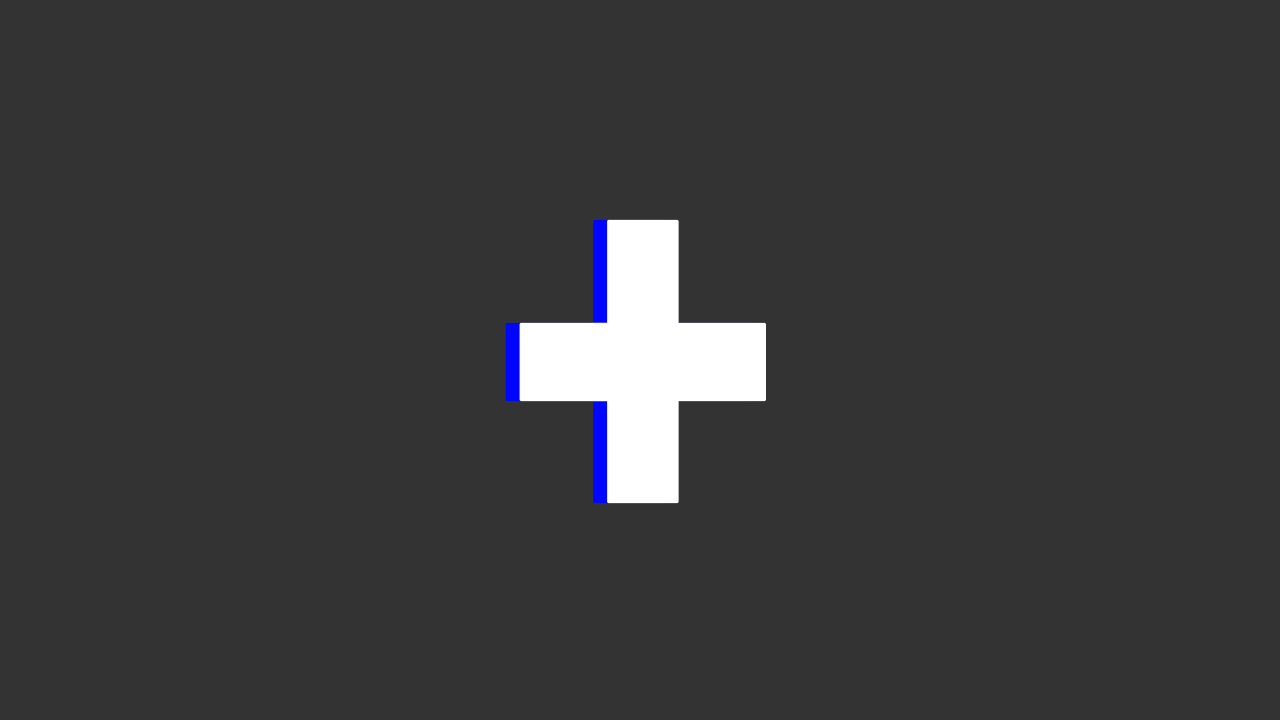
<style>
.page{position:relative;width:1280px;height:720px;background:#333333}
.page>*{position:absolute;margin:0}
.t1{font:131.9px "Bauhaus93";letter-spacing:-0.07em;color:#ffffff;font-weight:bold;scale:0.89 1}
</style>
<div class="page">
<p class="t1" style="left:519px;top:219px;width:247px;height:285px;text-align:center">+</p>
</div>
